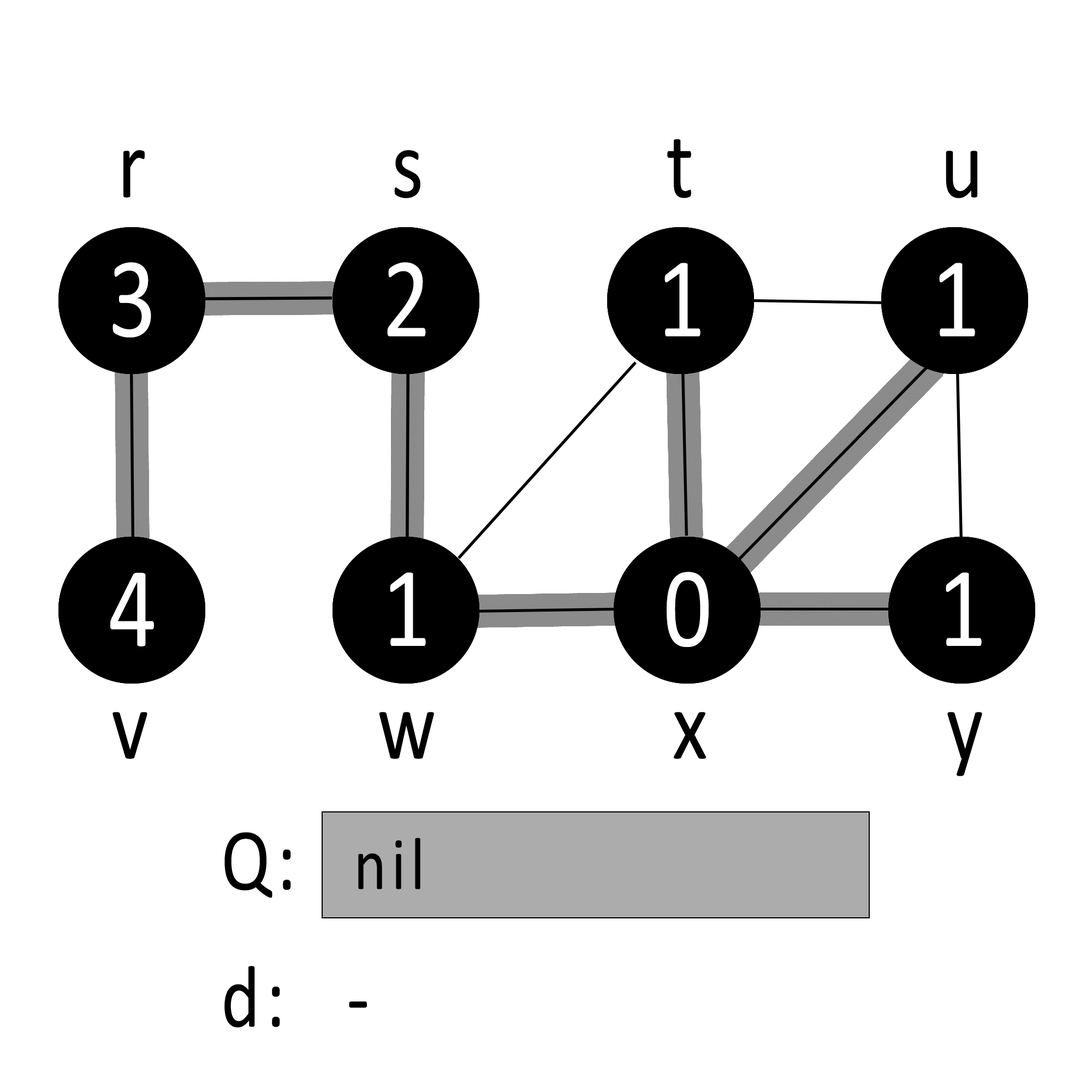
<style>
.page{position:relative;width:1092px;height:1092px;background:#ffffff}
.page>*{position:absolute;margin:0}
.t1{font:98.9px "Calibri";letter-spacing:0.08em;color:#000000;scale:0.83 1}
.t2{font:115.2px "Calibri";letter-spacing:0.08em;color:#ffffff;scale:0.83 1}
.t3{font:89px "Calibri";letter-spacing:0.08em;color:#000000;scale:0.83 1}
.t4{font:74.8px "Calibri";letter-spacing:0.08em;color:#000000;scale:0.83 1}
</style>
<div class="page">
<p class="t1" style="left:667px;top:139px;width:24px;height:59px">t</p>
<p class="t1" style="left:123px;top:150px;width:22px;height:48px">r</p>
<p class="t1" style="left:394px;top:150px;width:26px;height:48px">s</p>
<p class="t1" style="left:946px;top:151px;width:31px;height:47px">u</p>
<p class="t2" style="left:112px;top:262px;width:39px;height:75px">3</p>
<p class="t2" style="left:113px;top:263px;width:39px;height:75px">3</p>
<p class="t2" style="left:387px;top:262px;width:39px;height:74px">2</p>
<p class="t2" style="left:387px;top:262px;width:39px;height:74px">2</p>
<p class="t2" style="left:664px;top:263px;width:37px;height:73px">1</p>
<p class="t2" style="left:664px;top:263px;width:37px;height:73px">1</p>
<p class="t2" style="left:939px;top:263px;width:36px;height:73px">1</p>
<p class="t2" style="left:939px;top:263px;width:36px;height:73px">1</p>
<p class="t2" style="left:110px;top:573px;width:44px;height:73px">4</p>
<p class="t2" style="left:110px;top:573px;width:44px;height:73px">4</p>
<p class="t2" style="left:390px;top:572px;width:36px;height:74px">1</p>
<p class="t2" style="left:390px;top:572px;width:36px;height:74px">1</p>
<p class="t2" style="left:667px;top:572px;width:42px;height:75px">0</p>
<p class="t2" style="left:667px;top:572px;width:42px;height:75px">0</p>
<p class="t2" style="left:946px;top:572px;width:36px;height:74px">1</p>
<p class="t2" style="left:946px;top:572px;width:36px;height:74px">1</p>
<p class="t1" style="left:112px;top:712px;width:35px;height:47px">v</p>
<p class="t1" style="left:379px;top:712px;width:55px;height:47px">w</p>
<p class="t1" style="left:674px;top:712px;width:32px;height:47px">x</p>
<p class="t1" style="left:947px;top:712px;width:35px;height:64px">y</p>
<p class="t3" style="left:224px;top:832px;width:67px;height:66px">Q:</p>
<p class="t4" style="left:358px;top:838px;width:62px;height:51px">nil</p>
<p class="t3" style="left:224px;top:966px;width:56px;height:62px">d:</p>
<p class="t3" style="left:349px;top:1001px;width:18px;height:7px">-</p>
</div>
